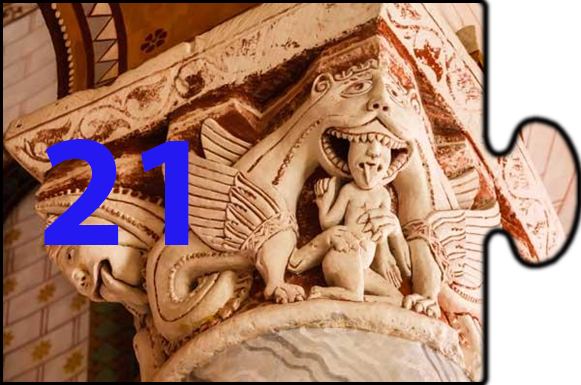
<style>
.page{position:relative;width:581px;height:385px}
.page>*{position:absolute;margin:0}
.t1{font:160px "MyriadPro-Bold";color:#241af1}
</style>
<div class="page">
<p class="t1" style="left:44px;top:139px;width:145px;height:106px">21</p>
</div>
